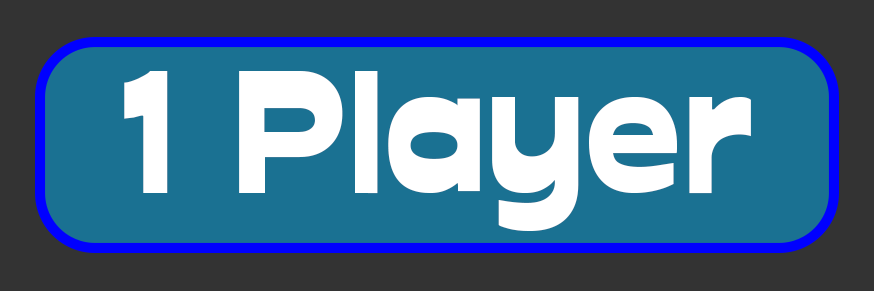
<style>
.page{position:relative;width:874px;height:291px;background:#1a7192}
.page>*{position:absolute;margin:0}
.t1{font:166.7px "Glockenspiel";color:#ffffff}
</style>
<div class="page">
<p class="t1" style="left:124px;top:71px;width:627px;height:160px">1 Player</p>
</div>
